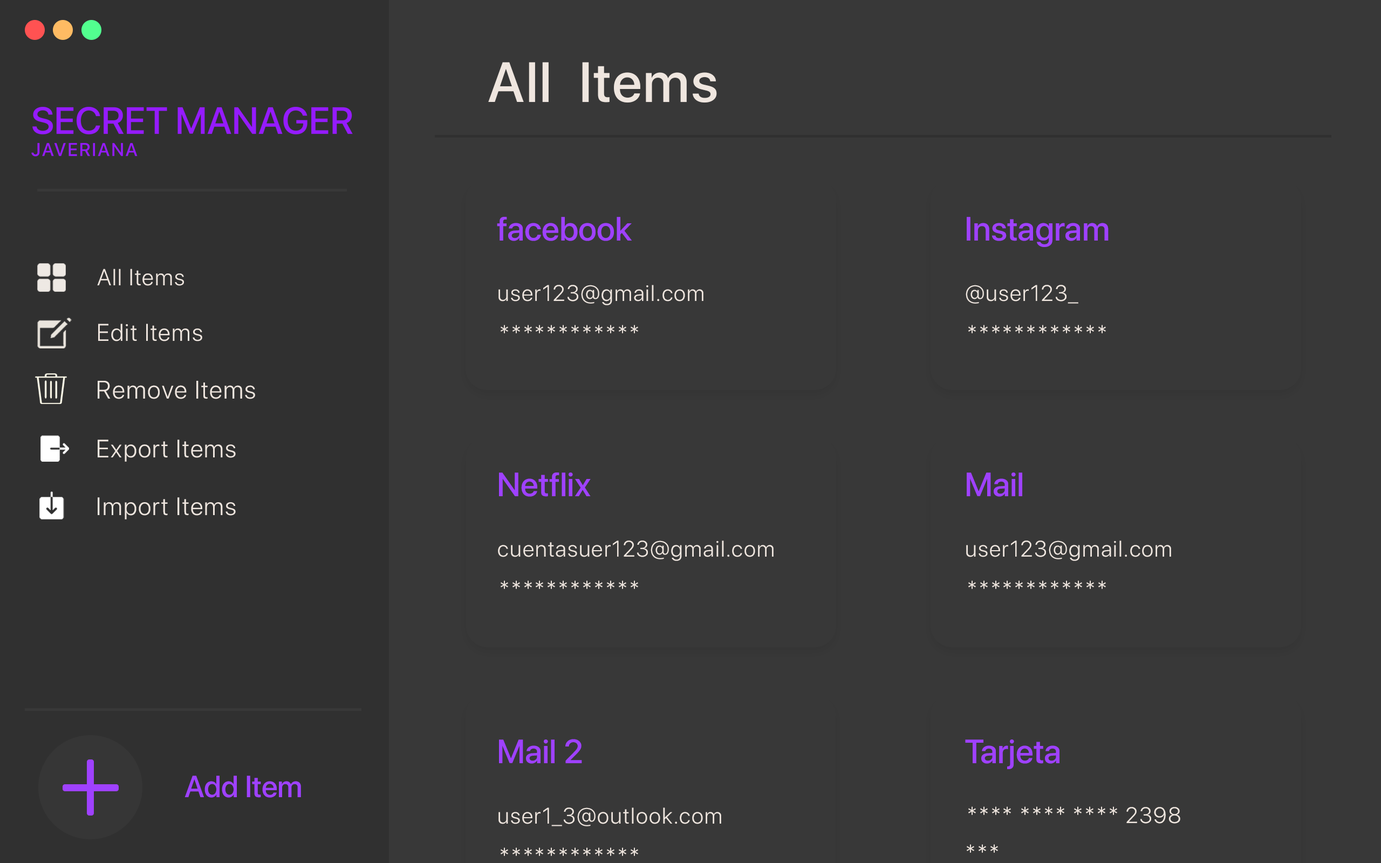
<style>
.page{position:relative;width:1381px;height:863px;background:#383838}
.page>*{position:absolute;margin:0}
.t1{font:56.2px "SFProDisplay-Medium";letter-spacing:0.025em;color:#efe6df}
.t2{font:33.5px "SFProDisplay-Medium";color:#9f41ff}
.t3{font:23.1px "SFProDisplay-Light";letter-spacing:0.05em;color:#efe6df}
.t4{font:22.5px "SFProDisplay-Light";letter-spacing:0.05em;color:#efe6df}
.t5{font:24px "SFProDisplay-Light";letter-spacing:0.05em;color:#efe6df}
.t6{font:25.3px "SFProDisplay-Light";letter-spacing:0.05em;color:#efe6df}
.t7{font:25px "SFProDisplay-Light";letter-spacing:0.05em;color:#efe6df}
.t8{font:30.4px "SFProDisplay-Medium";color:#9f41ff}
</style>
<div class="page">
<p class="t1" style="left:488px;top:62px;width:229px;height:41px">All  Items</p>
<p class="t2" style="left:497px;top:217px;width:135px;height:24px">facebook</p>
<p class="t2" style="left:967px;top:217px;width:142px;height:30px">Instagram</p>
<p class="t3" style="left:97px;top:269px;width:87px;height:17px">All Items</p>
<p class="t4" style="left:499px;top:285px;width:205px;height:20px">user123@gmail.com</p>
<p class="t4" style="left:966px;top:285px;width:113px;height:19px">@user123_</p>
<p class="t5" style="left:98px;top:324px;width:104px;height:18px">Edit Items</p>
<p class="t4" style="left:501px;top:325px;width:137px;height:8px">************</p>
<p class="t4" style="left:969px;top:325px;width:137px;height:8px">************</p>
<p class="t6" style="left:98px;top:381px;width:157px;height:18px">Remove Items</p>
<p class="t7" style="left:98px;top:440px;width:138px;height:22px">Export Items</p>
<p class="t2" style="left:499px;top:473px;width:92px;height:24px">Netflix</p>
<p class="t2" style="left:967px;top:473px;width:55px;height:24px">Mail</p>
<p class="t7" style="left:98px;top:497px;width:138px;height:23px">Import Items</p>
<p class="t4" style="left:498px;top:541px;width:276px;height:20px">cuentasuer123@gmail.com</p>
<p class="t4" style="left:966px;top:541px;width:205px;height:20px">user123@gmail.com</p>
<p class="t4" style="left:501px;top:581px;width:137px;height:8px">************</p>
<p class="t4" style="left:969px;top:581px;width:137px;height:8px">************</p>
<p class="t2" style="left:499px;top:739px;width:83px;height:25px">Mail 2</p>
<p class="t2" style="left:965px;top:740px;width:95px;height:29px">Tarjeta</p>
<p class="t8" style="left:185px;top:776px;width:116px;height:22px">Add Item</p>
<p class="t4" style="left:499px;top:808px;width:222px;height:19px">user1_3@outlook.com</p>
<p class="t4" style="left:969px;top:807px;width:212px;height:17px">**** **** **** 2398</p>
<p class="t4" style="left:967px;top:844px;width:31px;height:9px">***</p>
<p class="t4" style="left:501px;top:848px;width:137px;height:8px">************</p>
</div>
